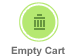
<style>
.page{position:relative;width:76px;height:56px;background:#ffffff}
.page>*{position:absolute;margin:0}
.t1{font:10.1px "Arial-BoldMT";color:#6e6e6e}
</style>
<div class="page">
<p class="t1" style="left:11px;top:46px;width:54px;height:10px">Empty Cart</p>
</div>
